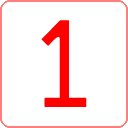
<style>
.page{position:relative;width:128px;height:128px;background:#ffffff}
.page>*{position:absolute;margin:0}
.t1{font:148px "OloronTryout";letter-spacing:-0.05em;color:#ff0000;font-weight:bold}
</style>
<div class="page">
<p class="t1" style="left:41px;top:20px;width:46px;height:87px">1</p>
</div>
